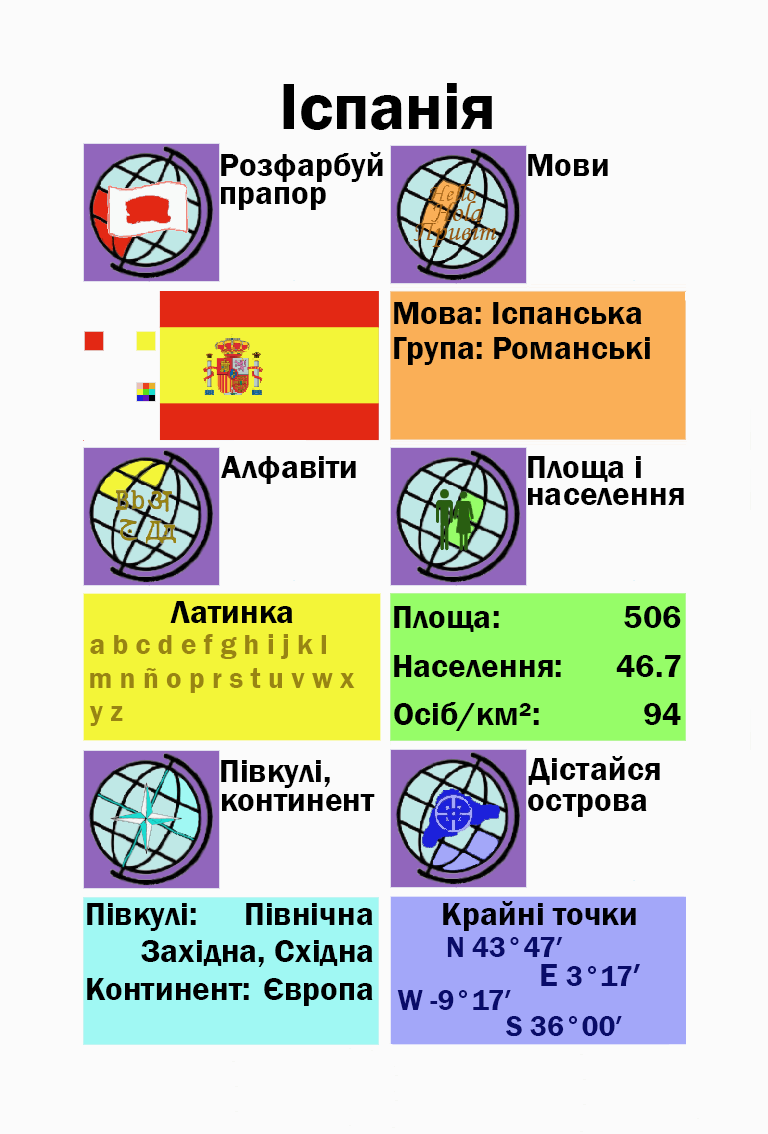
<style>
.page{position:relative;width:768px;height:1134px;background:#fbfbfb}
.page>*{position:absolute;margin:0}
.t1{font:66.7px "FranklinGothic-Demi";color:#000000}
.t2{font:33.3px "FranklinGothic-Demi";color:#000000}
.t3{font:33.3px "FranklinGothic-Demi";color:#000003}
.t4{font:29.2px "FranklinGothic-Demi";color:#988413}
.t5{font:29.2px "FranklinGothic-Demi";color:#090c69}
.t6{font:33.3px "FranklinGothic-Demi";color:#090c69}
</style>
<div class="page">
<p class="t1" style="left:283px;top:83px;width:209px;height:47px">Іспанія</p>
<p class="t2" style="left:221px;top:152px;width:162px;height:30px">Розфарбуй</p>
<p class="t2" style="left:528px;top:154px;width:80px;height:22px">Мови</p>
<p class="t2" style="left:221px;top:187px;width:105px;height:23px">прапор</p>
<p class="t2" style="left:394px;top:302px;width:248px;height:22px">Мова: Іспанська</p>
<p class="t2" style="left:394px;top:337px;width:256px;height:28px">Група: Романські</p>
<p class="t2" style="left:221px;top:456px;width:135px;height:28px">Алфавіти</p>
<p class="t2" style="left:528px;top:456px;width:113px;height:26px">Площа і</p>
<p class="t2" style="left:528px;top:488px;width:156px;height:17px">населення</p>
<p class="t2" style="left:170px;top:601px;width:123px;height:22px">Латинка</p>
<p class="t2" style="left:394px;top:606px;width:105px;height:26px">Площа:</p>
<p class="t3" style="left:624px;top:606px;width:57px;height:22px">506</p>
<p class="t4" style="left:90px;top:634px;width:236px;height:25px">a b c d e f g h i j k l</p>
<p class="t2" style="left:394px;top:655px;width:167px;height:22px">Населення:</p>
<p class="t2" style="left:616px;top:655px;width:65px;height:22px">46.7</p>
<p class="t4" style="left:90px;top:668px;width:265px;height:25px">m n ñ o p r s t u v w x</p>
<p class="t2" style="left:394px;top:702px;width:145px;height:29px">Осіб/км²:</p>
<p class="t4" style="left:89px;top:706px;width:34px;height:20px">y z</p>
<p class="t2" style="left:644px;top:703px;width:37px;height:22px">94</p>
<p class="t2" style="left:221px;top:760px;width:109px;height:28px">Півкулі,</p>
<p class="t2" style="left:528px;top:756px;width:132px;height:29px">Дістайся</p>
<p class="t2" style="left:222px;top:794px;width:153px;height:17px">континент</p>
<p class="t2" style="left:528px;top:794px;width:119px;height:23px">острова</p>
<p class="t2" style="left:87px;top:903px;width:109px;height:28px">Півкулі:</p>
<p class="t2" style="left:246px;top:903px;width:127px;height:22px">Північна</p>
<p class="t3" style="left:443px;top:901px;width:193px;height:30px">Крайні точки</p>
<p class="t2" style="left:141px;top:940px;width:232px;height:27px">Західна, Східна</p>
<p class="t5" style="left:447px;top:937px;width:116px;height:20px">N 43°47′</p>
<p class="t5" style="left:541px;top:964px;width:99px;height:22px"><span class="t6">E </span>3°17<span class="t6">′</span></p>
<p class="t2" style="left:87px;top:978px;width:162px;height:22px">Континент:</p>
<p class="t2" style="left:264px;top:978px;width:109px;height:28px">Європа</p>
<p class="t5" style="left:397px;top:990px;width:114px;height:20px">W -9°17′</p>
<p class="t5" style="left:506px;top:1016px;width:116px;height:21px">S 36°00′</p>
</div>
